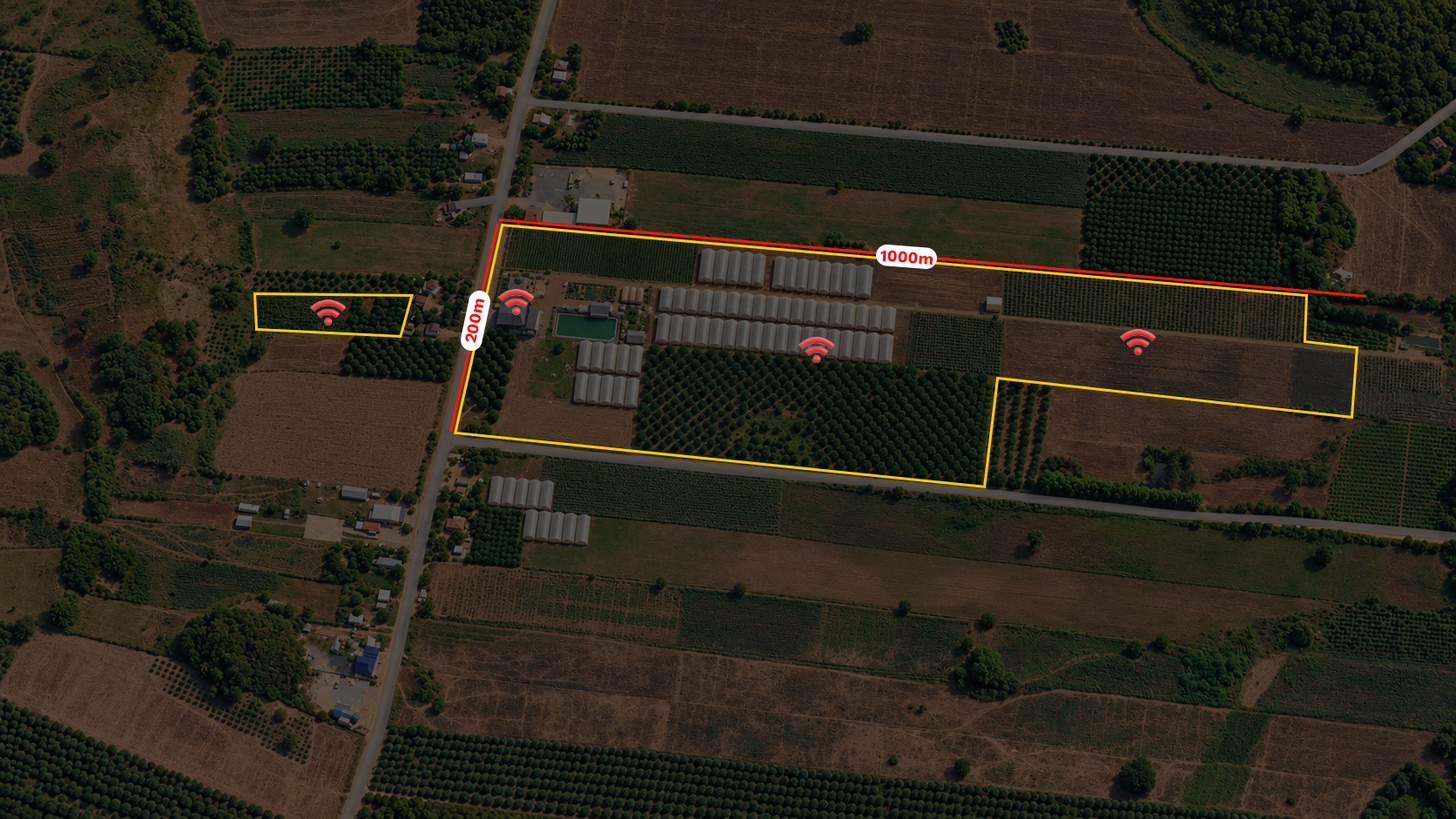
<style>
.page{position:relative;width:1456px;height:819px}
.page>*{position:absolute;margin:0}
.t1{font:16.5px "KantumruyPro-Bold";color:#ff0000}
</style>
<div class="page">
<p class="t1" style="left:880px;top:250px;width:52px;height:16px;rotate:4deg">1000m</p>
<p class="t1" style="left:465px;top:299px;width:20px;height:44px;rotate:-78deg">200m</p>
</div>
